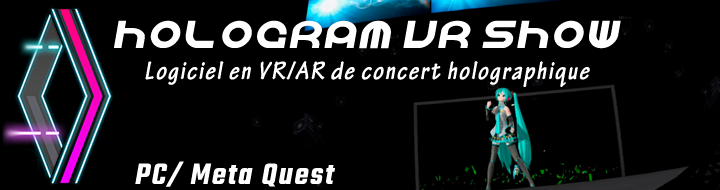
<style>
.page{position:relative;width:720px;height:190px;background:#000000}
.page>*{position:absolute;margin:0}
.t1{font:37px "Vocaloid";letter-spacing:0.06em;color:#ffffff;font-style:italic}
.t2{font:27px "TektonPro-BoldCond";letter-spacing:0.06em;color:#ffffff;font-style:italic}
.t3{font:32px "Teko-SemiBold";letter-spacing:0.06em;color:#ffffff;font-style:italic}
</style>
<div class="page">
<p class="t1" style="left:114px;top:20px;width:507px;height:29px">HOLOGRAM VR SHOW</p>
<p class="t2" style="left:145px;top:61px;width:445px;height:26px">Logiciel en VR/AR de concert holographique</p>
<p class="t3" style="left:135px;top:161px;width:200px;height:26px">PC/ Meta Quest</p>
</div>
